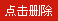
<style>
.page{position:relative;width:58px;height:21px;background:#ce1b0e}
.page>*{position:absolute;margin:0}
.t1{font:12px "SimSun";color:#fdfbfb}
</style>
<div class="page">
<p class="t1" style="left:5px;top:5px;width:47px;height:11px">点击删除</p>
</div>
